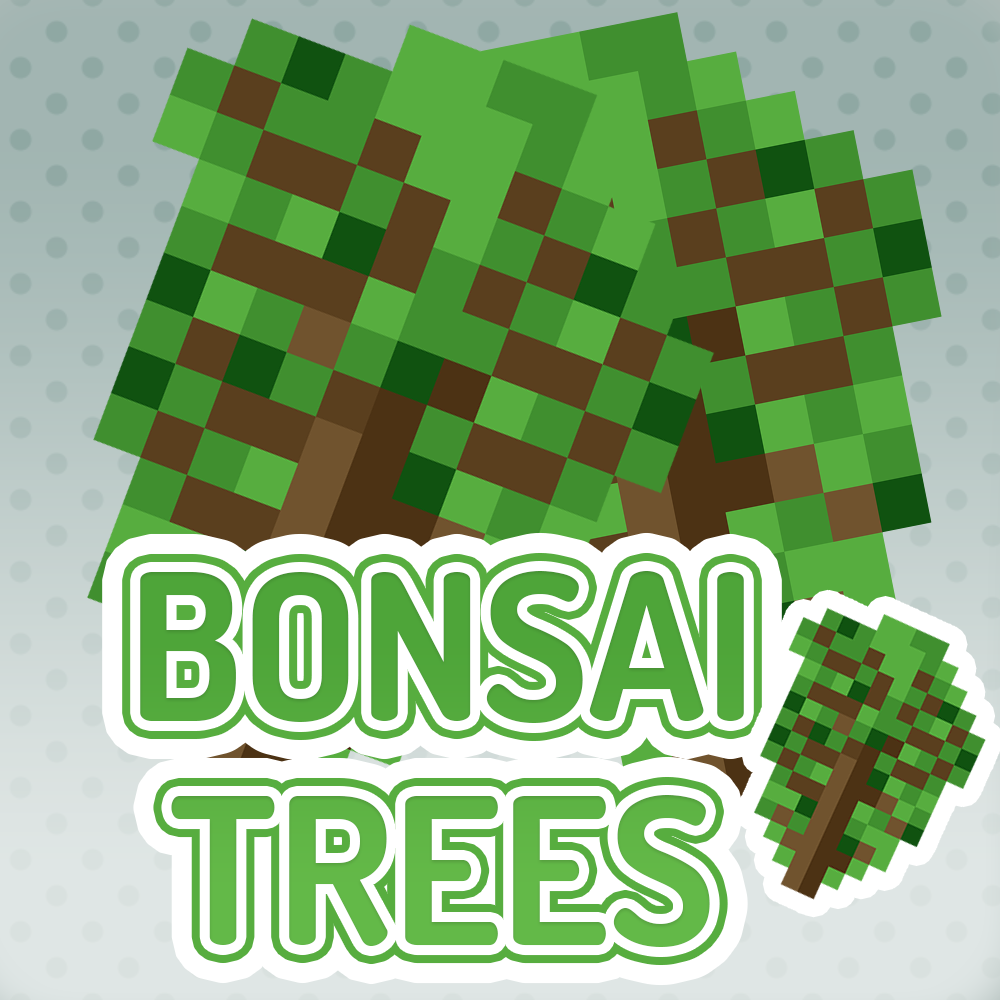
<style>
.page{position:relative;width:1000px;height:1000px}
.page>*{position:absolute;margin:0}
.t1{font:203.6px/223.8px "Dosis-Bold";color:#57ad3f}
</style>
<div class="page">
<p class="t1" style="left:140px;top:571px;width:604px;height:376px;text-align:center">BONSAI<br>TREES</p>
</div>
